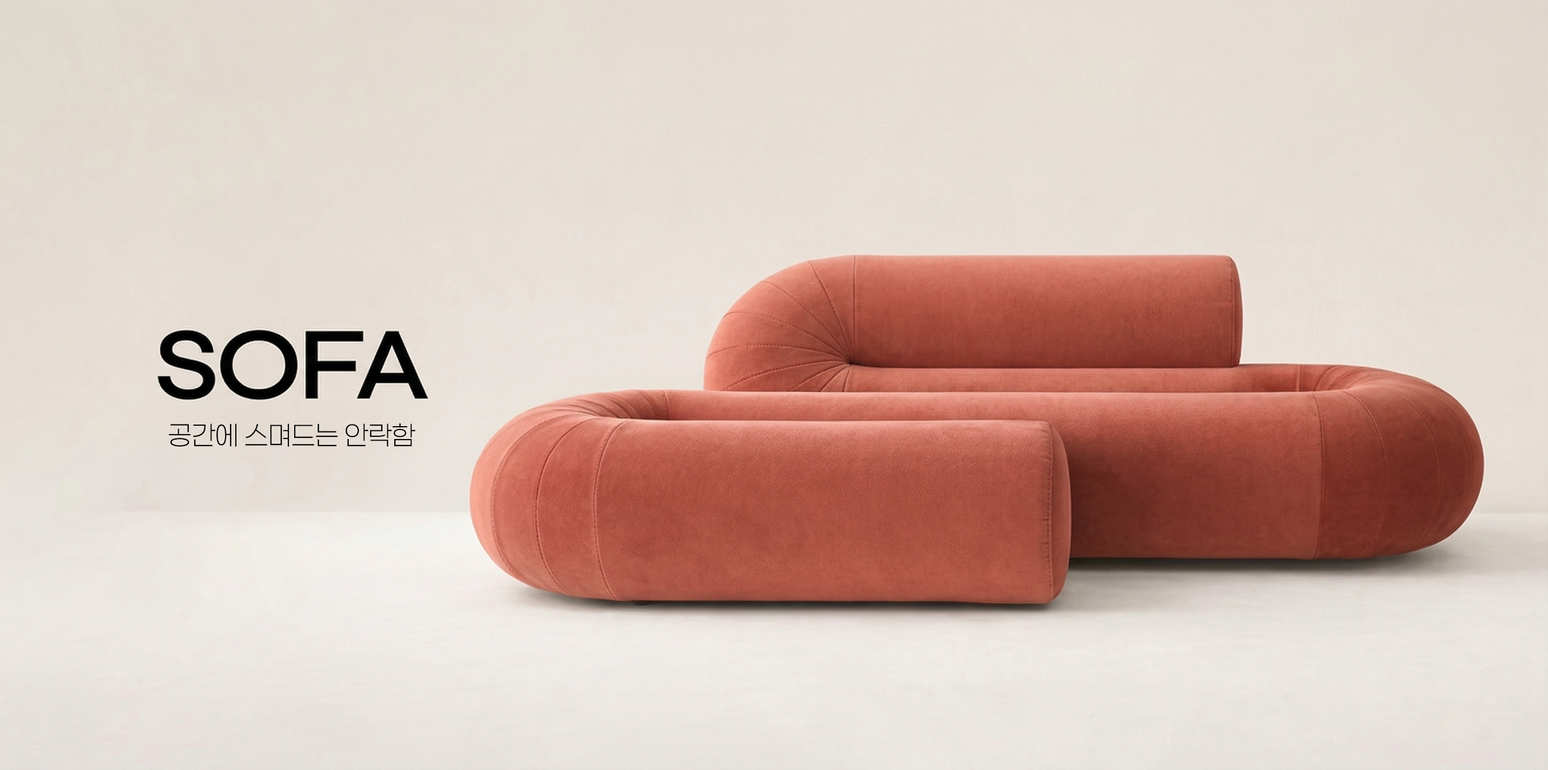
<style>
.page{position:relative;width:1548px;height:770px}
.page>*{position:absolute;margin:0}
.t1{font:26.7px "Paperlogy-2ExtraLight";color:#000000}
</style>
<div class="page">
<p class="t1" style="left:168px;top:423px;width:248px;height:24px">공간에 스며드는 안락함</p>
</div>
